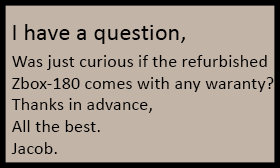
<style>
.page{position:relative;width:280px;height:168px;background:#c2b4a7}
.page>*{position:absolute;margin:0}
.t1{font:24px "Calibri";letter-spacing:0.01em;color:#000000}
.t2{font:18px "Calibri";letter-spacing:0.01em;color:#000000}
</style>
<div class="page">
<p class="t1" style="left:13px;top:24px;width:172px;height:20px">I have a question,</p>
<p class="t2" style="left:11px;top:55px;width:263px;height:99px">Was just curious if the refurbished<br>Zbox-180 comes with any waranty?<br>Thanks in advance,<br>All the best.<br>Jacob.</p>
</div>
